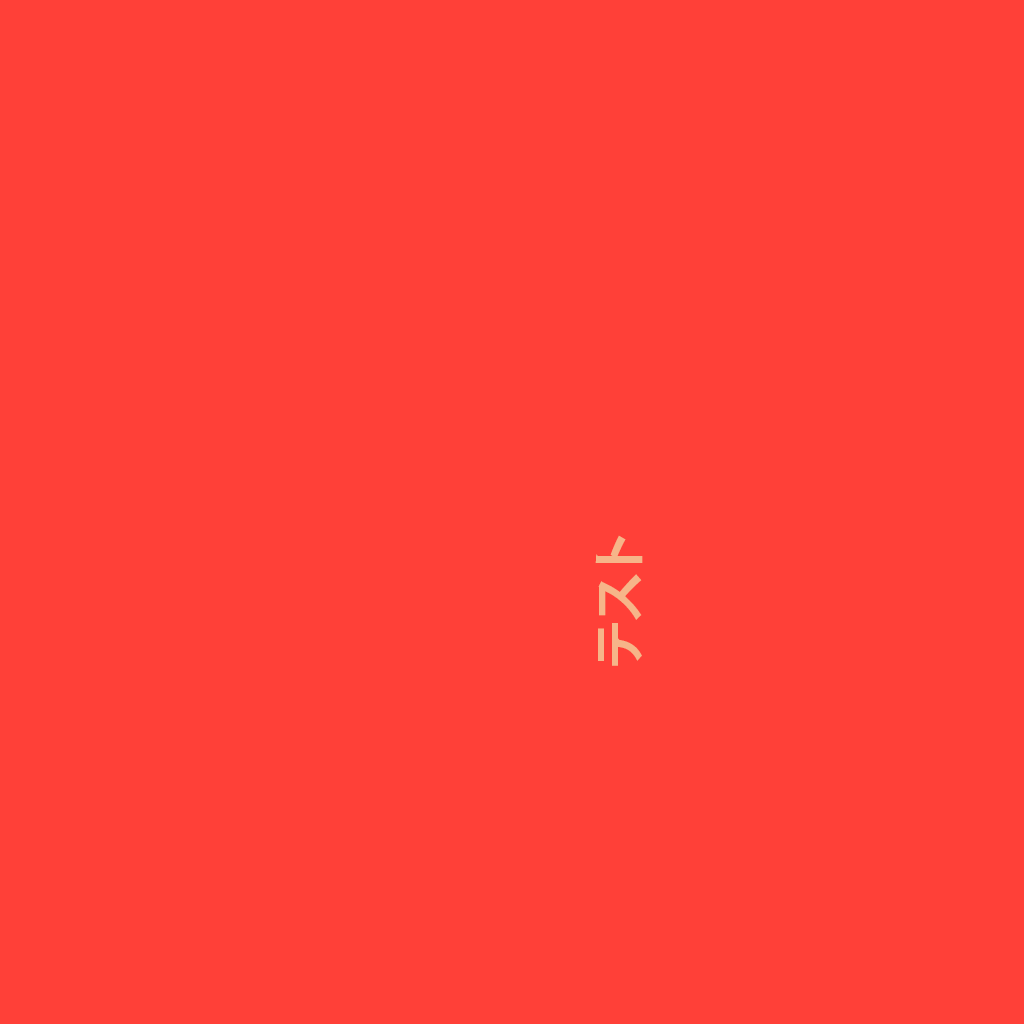
<style>
.page{position:relative;width:1024px;height:1024px;background:#ff4038}
.page>*{position:absolute;margin:0}
.t1{font:53px "KozGoPr6N-Bold";color:#f6b589;text-transform:uppercase}
</style>
<div class="page">
<p class="t1" style="left:595px;top:535px;width:48px;height:131px;rotate:-90deg">テスト</p>
</div>
